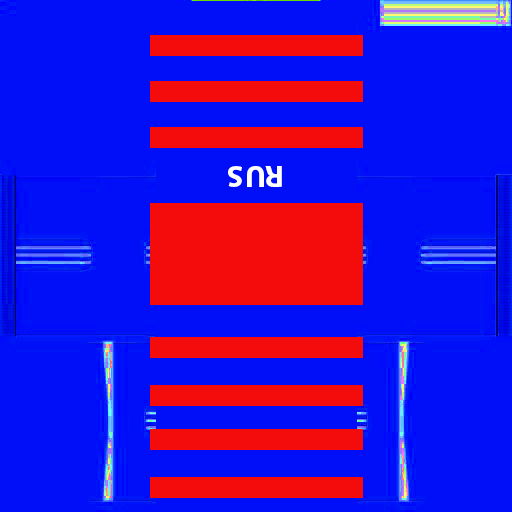
<style>
.page{position:relative;width:512px;height:512px;background:#000ff8}
.page>*{position:absolute;margin:0}
.t1{font:31px "MyriadPro-Bold";color:#ffffff}
</style>
<div class="page">
<p class="t1" style="left:228px;top:166px;width:54px;height:21px;rotate:180deg">RUS</p>
</div>
